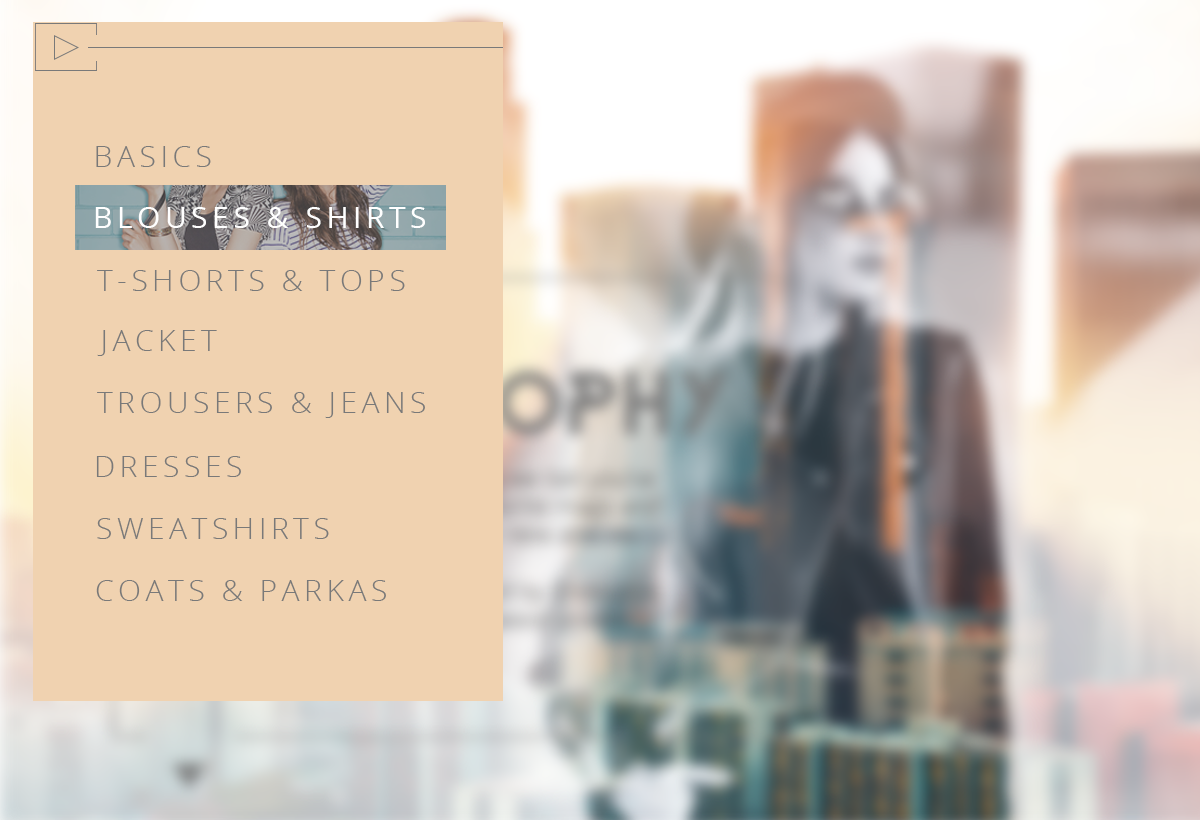
<style>
.page{position:relative;width:1200px;height:820px;background:#f0d2b0}
.page>*{position:absolute;margin:0}
.t1{font:30px "OpenSans-Light";letter-spacing:0.15em;color:#797979;text-transform:uppercase}
.t2{font:30px "OpenSans";letter-spacing:0.15em;color:#ffffff;text-transform:uppercase}
</style>
<div class="page">
<p class="t1" style="left:96px;top:146px;width:115px;height:21px">basics</p>
<p class="t2" style="left:95px;top:207px;width:330px;height:21px">blouses &amp; shirts</p>
<p class="t1" style="left:97px;top:270px;width:308px;height:21px">T-shorts &amp; tops</p>
<p class="t1" style="left:97px;top:330px;width:120px;height:26px">jacket</p>
<p class="t1" style="left:97px;top:392px;width:328px;height:26px">Trousers &amp; jeans</p>
<p class="t1" style="left:96px;top:456px;width:145px;height:21px">dresses</p>
<p class="t1" style="left:97px;top:518px;width:232px;height:21px">sweatshirts</p>
<p class="t1" style="left:96px;top:580px;width:290px;height:21px">coats &amp; parkas</p>
</div>
